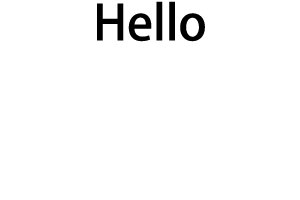
<style>
.page{position:relative;width:300px;height:200px;background:#ffffff}
.page>*{position:absolute;margin:0}
.t1{font:48px "AdobeHeitiStd-Regular";color:#000000}
</style>
<div class="page">
<p class="t1" style="left:97px;top:1px;width:108px;height:41px">Hello</p>
</div>
